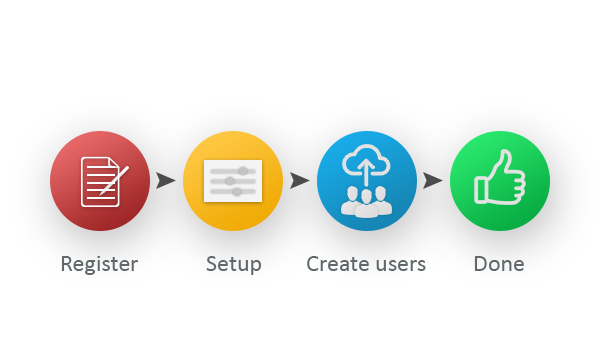
<style>
.page{position:relative;width:600px;height:362px;background:#ffffff}
.page>*{position:absolute;margin:0}
.t1{font:24px "Calibri";color:#60686b}
</style>
<div class="page">
<p class="t1" style="left:61px;top:256px;width:77px;height:19px">Register</p>
<p class="t1" style="left:206px;top:256px;width:56px;height:19px">Setup</p>
<p class="t1" style="left:307px;top:256px;width:119px;height:15px">Create users</p>
<p class="t1" style="left:474px;top:256px;width:50px;height:15px">Done</p>
</div>
